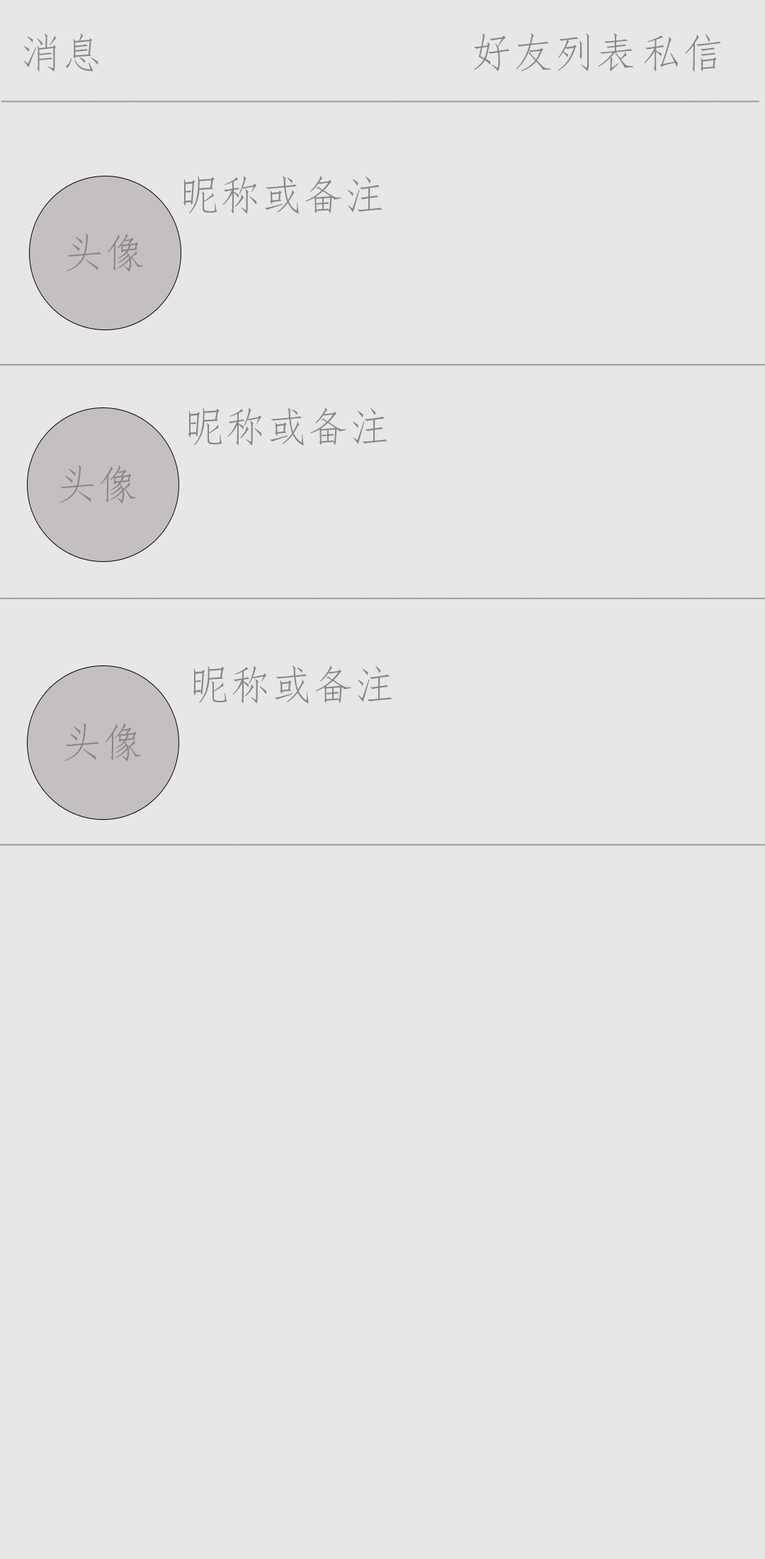
<style>
.page{position:relative;width:765px;height:1559px;background:#e7e7e7}
.page>*{position:absolute;margin:0}
.t1{font:41.3px "FangSong";color:#878787}
</style>
<div class="page">
<p class="t1" style="left:23px;top:33px;width:75px;height:39px">消息</p>
<p class="t1" style="left:474px;top:33px;width:159px;height:39px">好友列表</p>
<p class="t1" style="left:644px;top:34px;width:77px;height:38px">私信</p>
<p class="t1" style="left:183px;top:176px;width:200px;height:38px">昵称或备注</p>
<p class="t1" style="left:67px;top:233px;width:76px;height:39px">头像</p>
<p class="t1" style="left:188px;top:407px;width:200px;height:39px">昵称或备注</p>
<p class="t1" style="left:60px;top:465px;width:76px;height:39px">头像</p>
<p class="t1" style="left:193px;top:665px;width:199px;height:38px">昵称或备注</p>
<p class="t1" style="left:64px;top:723px;width:77px;height:39px">头像</p>
</div>
